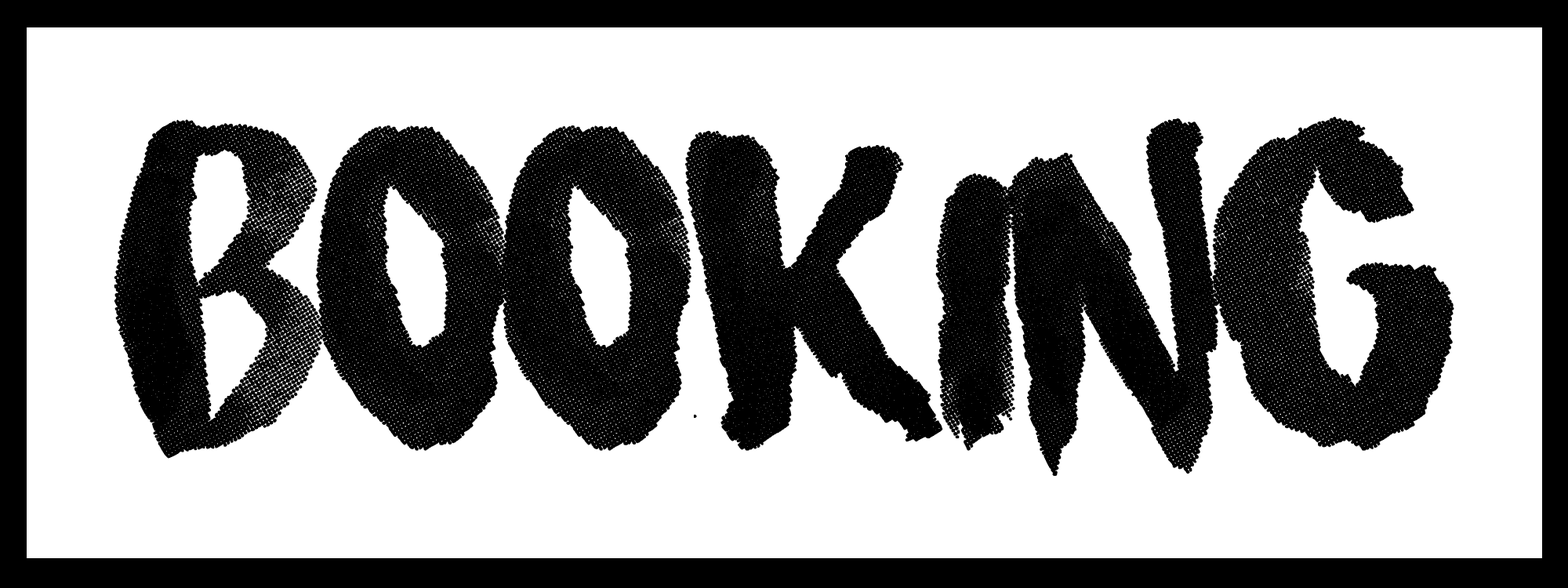
<style>
.page{position:relative;width:1568px;height:588px;background:#ffffff}
.page>*{position:absolute;margin:0}
.t1{font:345.7px "SurfingCapital";color:#000000}
</style>
<div class="page">
<p class="t1" style="left:114px;top:117px;width:1340px;height:358px">BOOKING</p>
</div>
